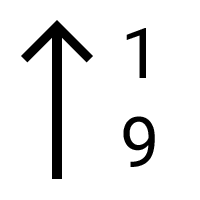
<style>
.page{position:relative;width:200px;height:200px;background:#ffffff}
.page>*{position:absolute;margin:0}
.t1{font:70px "Roboto-Regular";color:#000000}
</style>
<div class="page">
<p class="t1" style="left:126px;top:28px;width:20px;height:50px">1</p>
<p class="t1" style="left:123px;top:116px;width:32px;height:51px">9</p>
</div>
